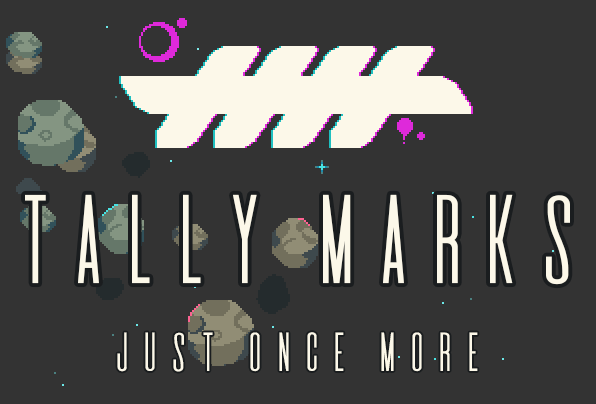
<style>
.page{position:relative;width:596px;height:404px;background:#333333}
.page>*{position:absolute;margin:0}
.t1{font:110px "DeValencia-Regular";letter-spacing:-0.1em;color:#fcf8e9}
.t2{font:48px "DeValencia-Regular";color:#fcf8e9}
</style>
<div class="page">
<p class="t1" style="left:25px;top:194px;width:545px;height:91px">TALLY MARKS</p>
<p class="t2" style="left:117px;top:332px;width:361px;height:40px">JUST ONCE MORE</p>
</div>
